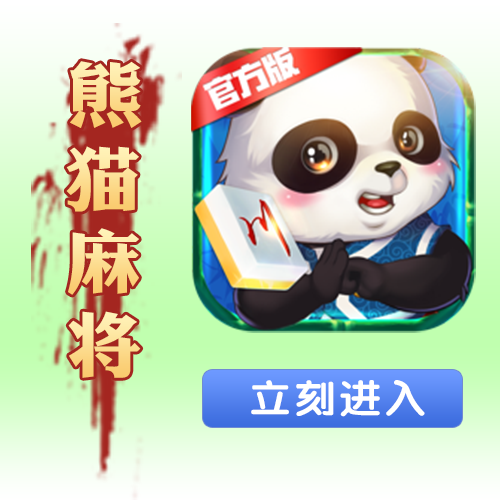
<style>
.page{position:relative;width:500px;height:500px}
.page>*{position:absolute;margin:0}
.t1{font:70px "DFPLiJinHeiW8";scale:1.08 1}
.t2{font:39.2px "FZY4JW--GB1-0";letter-spacing:0.06em;color:#ffffff;scale:1.08 1}
</style>
<div class="page">
<p class="t1" style="left:70px;top:61px;width:72px;height:67px">熊</p>
<p class="t1" style="left:66px;top:146px;width:73px;height:66px">猫</p>
<p class="t1" style="left:68px;top:228px;width:71px;height:67px">麻</p>
<p class="t1" style="left:68px;top:311px;width:73px;height:67px">将</p>
<p class="t2" style="left:251px;top:380px;width:174px;height:37px">立刻进入</p>
</div>
